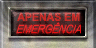
<style>
.page{position:relative;width:96px;height:48px}
.page>*{position:absolute;margin:0}
.t1{font:11px "Arial-BoldMT";color:#c42c27;scale:0.96 1}
.t2{font:11.4px "Arial-ItalicMT";letter-spacing:-0.05em;color:#db1818;font-weight:bold;font-style:italic;scale:0.88 1}
</style>
<div class="page">
<p class="t1" style="left:17px;top:12px;width:63px;height:9px">APENAS EM</p>
<p class="t2" style="left:16px;top:22px;width:65px;height:12px">EMERGÊNCIA</p>
</div>
